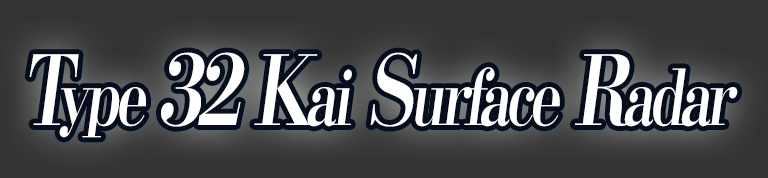
<style>
.page{position:relative;width:768px;height:178px;background:#333333}
.page>*{position:absolute;margin:0}
.t1{font:76.8px "KochoStd-Heavy";letter-spacing:-0.08em;color:#ffffff;font-style:italic;scale:0.75 1}
.t2{font:96px "KochoStd-Heavy";letter-spacing:-0.08em;color:#ffffff;font-style:italic;scale:0.75 1}
</style>
<div class="page">
<p class="t1" style="left:29px;top:52px;width:709px;height:86px"><span class="t2">T</span>ype <span class="t2">32 K</span>ai<span class="t2"> S</span>urface<span class="t2"> R</span>adar</p>
</div>
